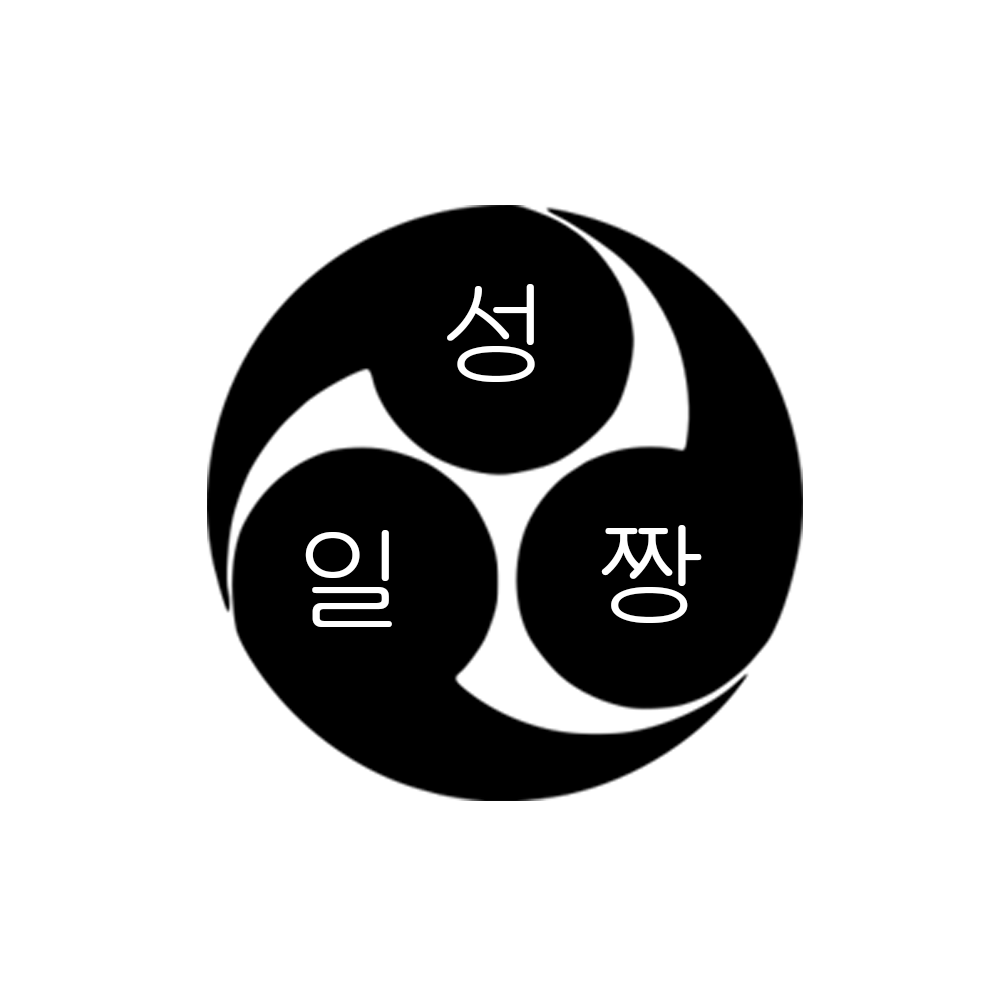
<style>
.page{position:relative;width:1000px;height:1000px;background:#ffffff}
.page>*{position:absolute;margin:0}
.t1{font:120px "Gulim";color:#ffffff}
</style>
<div class="page">
<p class="t1" style="left:447px;top:284px;width:88px;height:98px">성</p>
<p class="t1" style="left:305px;top:530px;width:87px;height:97px">일</p>
<p class="t1" style="left:601px;top:525px;width:101px;height:98px">짱</p>
</div>
